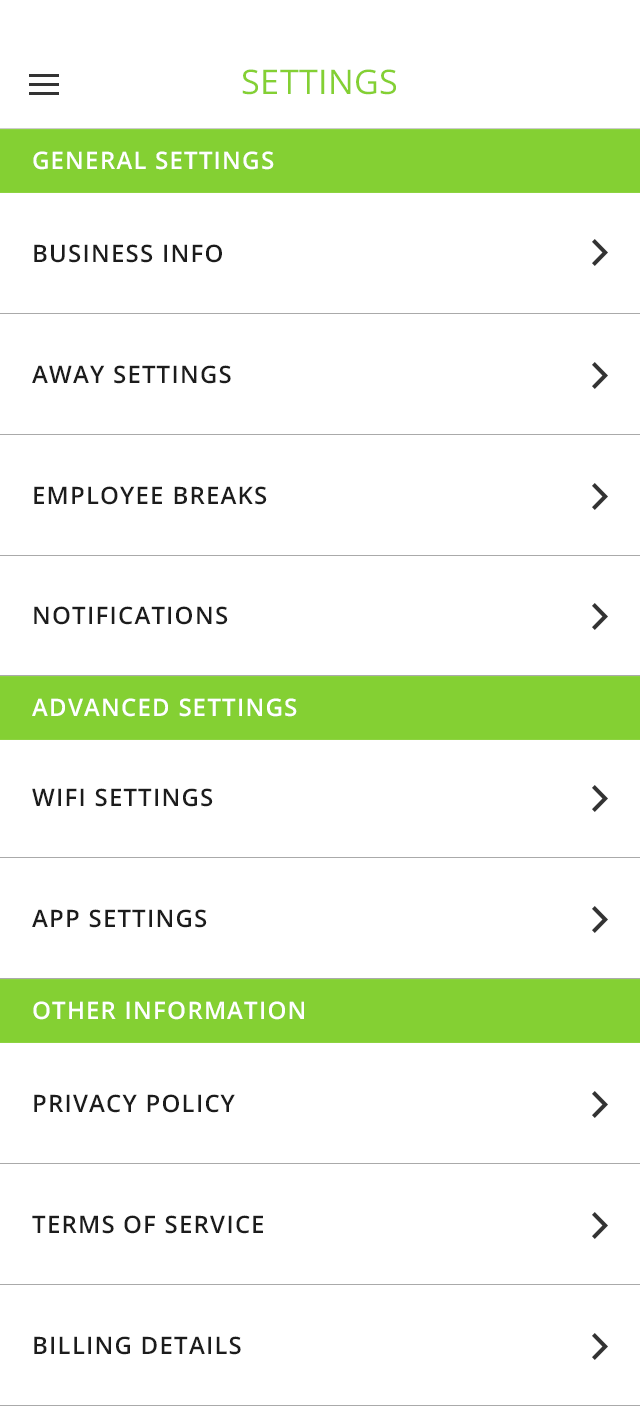
<style>
.page{position:relative;width:640px;height:1406px;background:#ffffff}
.page>*{position:absolute;margin:0}
.t1{font:34px "OpenSans";letter-spacing:0.01em;color:#84d033;text-transform:uppercase}
.t2{font:24px "OpenSans-Semibold";letter-spacing:0.05em;color:#ffffff;text-transform:uppercase}
.t3{font:24px "OpenSans-Semibold";letter-spacing:0.05em;color:#1c1c1c;text-transform:uppercase}
</style>
<div class="page">
<p class="t1" style="left:242px;top:69px;width:154px;height:26px">Settings</p>
<p class="t2" style="left:33px;top:151px;width:241px;height:19px">GENERAL SETTINGS</p>
<p class="t3" style="left:34px;top:244px;width:188px;height:19px">bUSINESS INFO</p>
<p class="t3" style="left:32px;top:365px;width:199px;height:19px">AWAY SETTINGS</p>
<p class="t3" style="left:34px;top:486px;width:233px;height:19px">EMPLOYEE BREAKS</p>
<p class="t3" style="left:34px;top:606px;width:194px;height:19px">NOTIFICATIONS</p>
<p class="t2" style="left:32px;top:698px;width:265px;height:19px">ADVANCED SETTINGS</p>
<p class="t3" style="left:32px;top:788px;width:181px;height:19px">WIFI SETTINGS</p>
<p class="t3" style="left:32px;top:909px;width:175px;height:19px">APP SETTINGS</p>
<p class="t2" style="left:33px;top:1001px;width:271px;height:19px">OTHER INFOrmation</p>
<p class="t3" style="left:34px;top:1094px;width:201px;height:19px">Privacy Policy</p>
<p class="t3" style="left:32px;top:1215px;width:231px;height:19px">Terms of service</p>
<p class="t3" style="left:34px;top:1336px;width:207px;height:19px">BILLING details</p>
</div>
